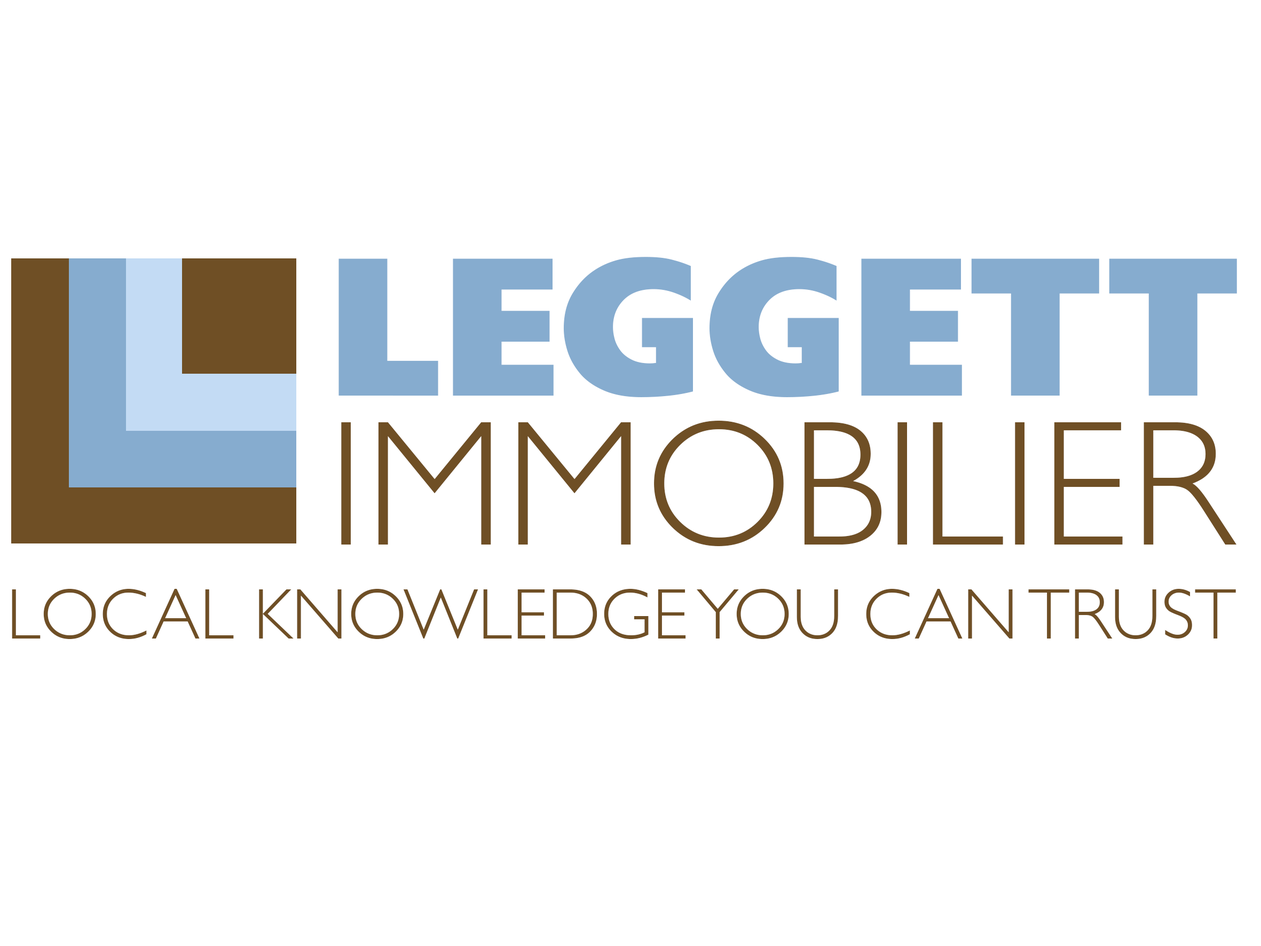
<style>
.page{position:relative;width:1261px;height:946px;background:#ffffff}
.page>*{position:absolute;margin:0}
.t1{font:197.5px "GillSansDisplay-ExtraBold";color:#86accf}
.t2{font:179.3px "GillSans-Light";color:#6f4f25}
.t3{font:179.3px "GillSans-Light";letter-spacing:-0.012em;color:#6f4f25}
.t4{font:179.3px "GillSans-Light";letter-spacing:-0.01em;color:#6f4f25}
.t5{font:179.3px "GillSans-Light";letter-spacing:0.01em;color:#6f4f25}
.t6{font:72.1px "GillSans-Light";color:#6f4f25}
</style>
<div class="page">
<p class="t1" style="left:338px;top:257px;width:899px;height:140px">LEGGETT</p>
<p class="t2" style="left:341px;top:421px;width:896px;height:125px">IMM<span class="t3">OBI</span><span class="t4">L</span><span class="t5">IER</span></p>
<p class="t6" style="left:12px;top:589px;width:1224px;height:50px">LOCAL KNOWLEDGE YOU CAN TRUST</p>
</div>
